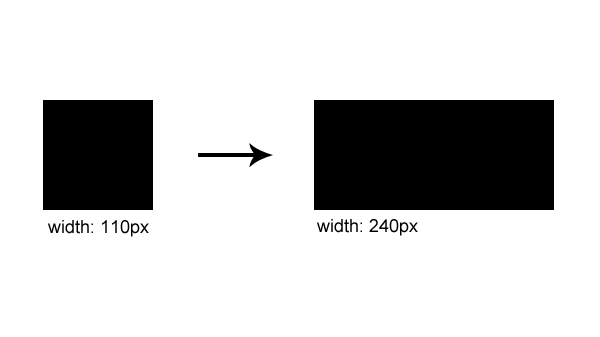
<style>
.page{position:relative;width:600px;height:337px;background:#ffffff}
.page>*{position:absolute;margin:0}
.t1{font:18px "ArialMT";color:#000000}
</style>
<div class="page">
<p class="t1" style="left:48px;top:220px;width:101px;height:17px">width: 110px</p>
<p class="t1" style="left:317px;top:219px;width:101px;height:17px">width: 240px</p>
</div>
